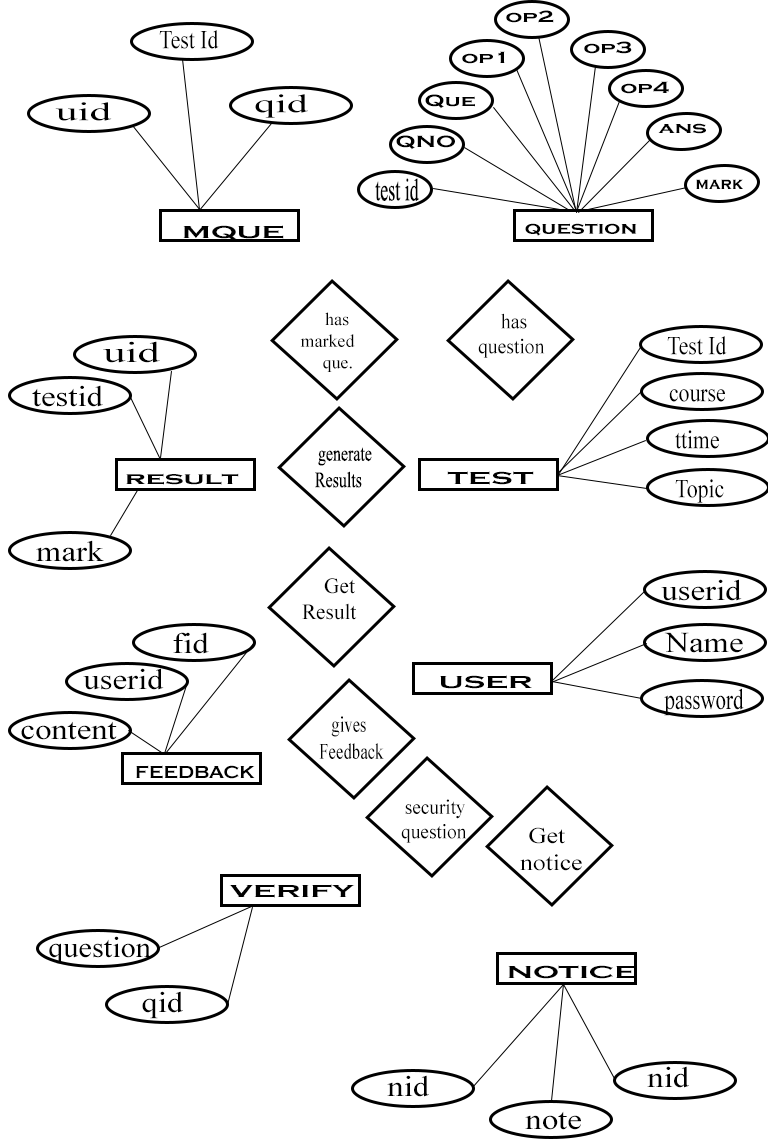
<style>
.page{position:relative;width:768px;height:1139px;background:#ffffff}
.page>*{position:absolute;margin:0}
.t1{font:16.7px "CopperplateGothic-Bold";color:#000000;scale:1.41 1}
.t2{font:25.9px "TimesNewRomanPSMT";color:#000000;scale:0.84 1}
.t3{font:25.9px "TimesNewRomanPSMT";color:#000000;scale:1.67 1}
.t4{font:25.9px "TimesNewRomanPSMT";color:#000000;scale:1.63 1}
.t5{font:31.4px "TimesNewRomanPSMT";color:#000000;scale:0.57 1}
.t6{font:16.7px "CopperplateGothic-Bold";color:#000000}
.t7{font:18px "CopperplateGothic-Bold";color:#000000;scale:1.68 1}
.t8{font:18px "CopperplateGothic-Bold";color:#000000;scale:1.25 1}
.t9{font:18px "TimesNewRomanPSMT";color:#000000}
.t10{font:20.8px "TimesNewRomanPSMT";color:#000000;scale:0.94 1}
.t11{font:29px "TimesNewRomanPSMT";color:#000000;scale:1.54 1}
.t12{font:29px "TimesNewRomanPSMT";color:#000000;scale:1.13 1}
.t13{font:22px "TimesNewRomanPSMT";color:#000000;scale:0.72 1}
.t14{font:21.6px "TimesNewRomanPSMT";color:#000000}
.t15{font:29px "TimesNewRomanPSMT";color:#000000;scale:0.72 1}
.t16{font:22.4px "TimesNewRomanPSMT";color:#000000;scale:0.75 1}
.t17{font:18px "CopperplateGothic-Bold";color:#000000;scale:1.06 1}
.t18{font:20.6px "TimesNewRomanPSMT";color:#000000;scale:0.94 1}
.t19{font:22.7px "TimesNewRomanPSMT";color:#000000;scale:1.13 1}
.t20{font:29px "TimesNewRomanPSMT";color:#000000;scale:1.05 1}
</style>
<div class="page">
<p class="t1" style="left:506px;top:10px;width:48px;height:13px">op2</p>
<p class="t2" style="left:159px;top:30px;width:60px;height:19px">Test Id</p>
<p class="t1" style="left:584px;top:41px;width:48px;height:13px">op3</p>
<p class="t1" style="left:462px;top:51px;width:43px;height:13px">op1</p>
<p class="t1" style="left:621px;top:81px;width:48px;height:13px">op4</p>
<p class="t3" style="left:55px;top:102px;width:57px;height:19px">uid</p>
<p class="t4" style="left:255px;top:94px;width:53px;height:24px">qid</p>
<p class="t1" style="left:425px;top:94px;width:50px;height:15px">Que</p>
<p class="t1" style="left:658px;top:123px;width:48px;height:11px">ans</p>
<p class="t1" style="left:396px;top:135px;width:59px;height:15px">QNO</p>
<p class="t5" style="left:375px;top:178px;width:44px;height:23px">test id</p>
<p class="t6" style="left:696px;top:179px;width:47px;height:10px">mark</p>
<p class="t7" style="left:183px;top:225px;width:101px;height:16px">MQUE</p>
<p class="t8" style="left:525px;top:223px;width:112px;height:13px">question</p>
<p class="t9" style="left:300px;top:312px;width:55px;height:60px">has <br>marked <br>   que.</p>
<p class="t10" style="left:478px;top:313px;width:67px;height:45px">has<br>question</p>
<p class="t11" style="left:103px;top:341px;width:57px;height:22px">uid</p>
<p class="t2" style="left:667px;top:336px;width:60px;height:19px">Test Id</p>
<p class="t12" style="left:32px;top:385px;width:71px;height:22px">testid</p>
<p class="t2" style="left:669px;top:389px;width:56px;height:13px">course</p>
<p class="t2" style="left:675px;top:430px;width:44px;height:19px">ttime</p>
<p class="t13" style="left:315px;top:447px;width:57px;height:41px">generate<br>      Results</p>
<p class="t7" style="left:126px;top:473px;width:113px;height:12px">result</p>
<p class="t7" style="left:447px;top:471px;width:87px;height:14px">TEST</p>
<p class="t2" style="left:675px;top:479px;width:49px;height:24px">Topic</p>
<p class="t12" style="left:36px;top:540px;width:68px;height:22px">mark</p>
<p class="t14" style="left:302px;top:578px;width:55px;height:42px">Get<br>Result</p>
<p class="t12" style="left:661px;top:579px;width:81px;height:22px">userid</p>
<p class="t12" style="left:173px;top:632px;width:36px;height:22px">fid</p>
<p class="t12" style="left:664px;top:632px;width:79px;height:21px">Name</p>
<p class="t12" style="left:83px;top:668px;width:81px;height:22px">userid</p>
<p class="t7" style="left:440px;top:675px;width:92px;height:14px">USER</p>
<p class="t15" style="left:664px;top:688px;width:80px;height:28px">password</p>
<p class="t12" style="left:21px;top:721px;width:96px;height:19px">content</p>
<p class="t16" style="left:319px;top:716px;width:65px;height:43px">gives<br>      Feedback</p>
<p class="t17" style="left:136px;top:765px;width:119px;height:14px">FEEDBACK</p>
<p class="t18" style="left:401px;top:799px;width:66px;height:44px">security<br>  question</p>
<p class="t19" style="left:520px;top:827px;width:62px;height:44px">Get <br>notice</p>
<p class="t7" style="left:229px;top:884px;width:126px;height:14px">VERIFY</p>
<p class="t20" style="left:49px;top:936px;width:102px;height:28px">question</p>
<p class="t7" style="left:508px;top:965px;width:128px;height:14px">NOTICE</p>
<p class="t12" style="left:142px;top:991px;width:41px;height:28px">qid</p>
<p class="t12" style="left:647px;top:1066px;width:42px;height:22px">nid</p>
<p class="t12" style="left:387px;top:1075px;width:42px;height:22px">nid</p>
<p class="t12" style="left:525px;top:1111px;width:56px;height:19px">note</p>
</div>
